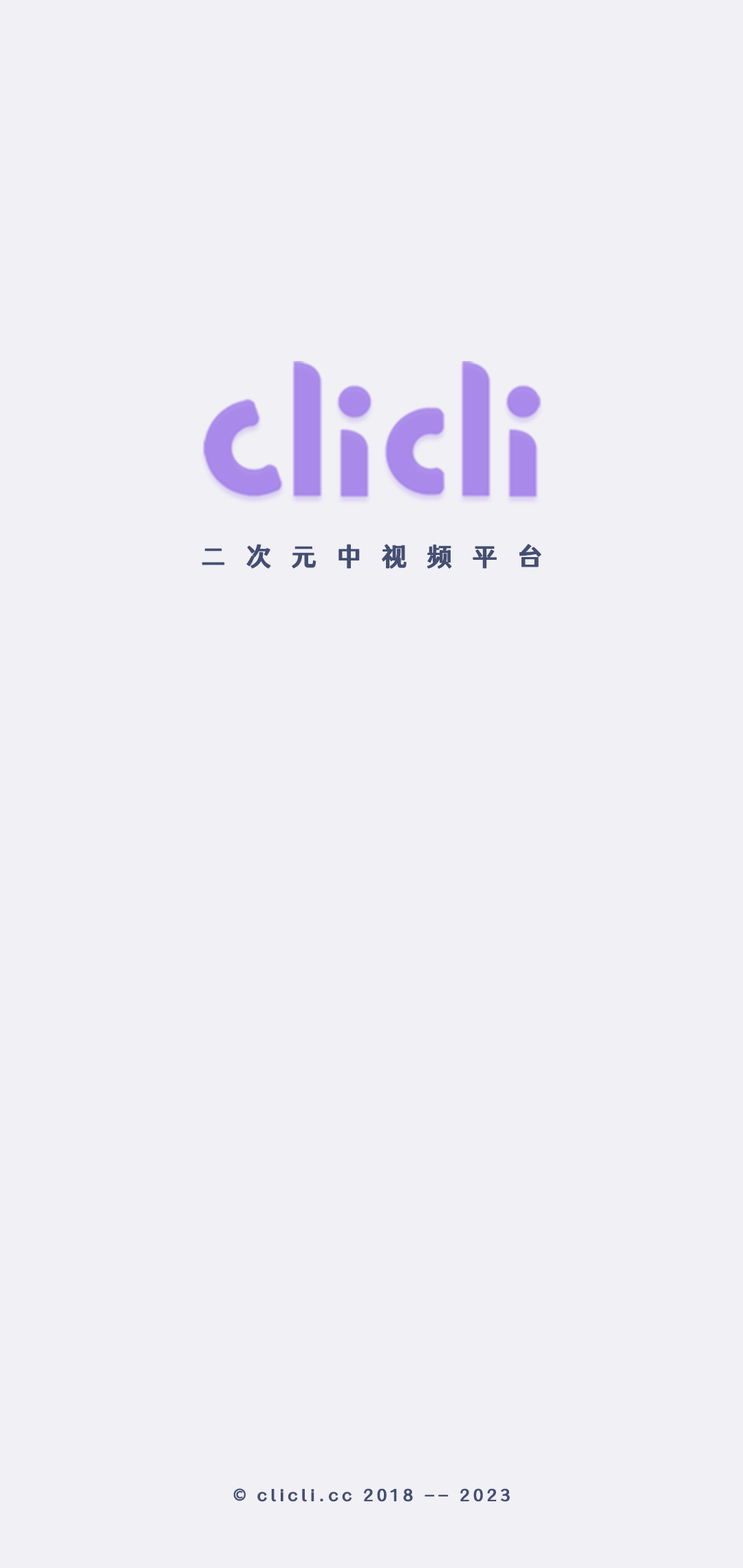
<style>
.page{position:relative;width:743px;height:1568px;background:#f0f0f5}
.page>*{position:absolute;margin:0}
.t1{font:24.8px "CELINGDHS_CU--GB1-0";letter-spacing:0.8em;color:#454e73;font-weight:bold}
.t2{font:16.5px "CELINGDHS_CU--GB1-0";letter-spacing:0.2em;color:#454e73;font-weight:bold}
.t3{font:16.5px "AdobeHeitiStd-Regular";letter-spacing:0.2em;color:#454e73;font-weight:bold}
</style>
<div class="page">
<p class="t1" style="left:202px;top:543px;width:339px;height:26px">二次元中视频平台</p>
<p class="t2" style="left:233px;top:1488px;width:277px;height:14px"><span class="t3">© </span>clicli.cc 2018 -- 2023</p>
</div>
